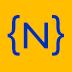
<style>
.page{position:relative;width:72px;height:72px;background:#ffbf00}
.page>*{position:absolute;margin:0}
.t1{font:43.5px "GillSans";color:#0030b2}
.t2{font:38.1px "GillSans";color:#0030b2}
</style>
<div class="page">
<p class="t1" style="left:7px;top:15px;width:57px;height:41px">{<span class="t2">N</span>}</p>
</div>
